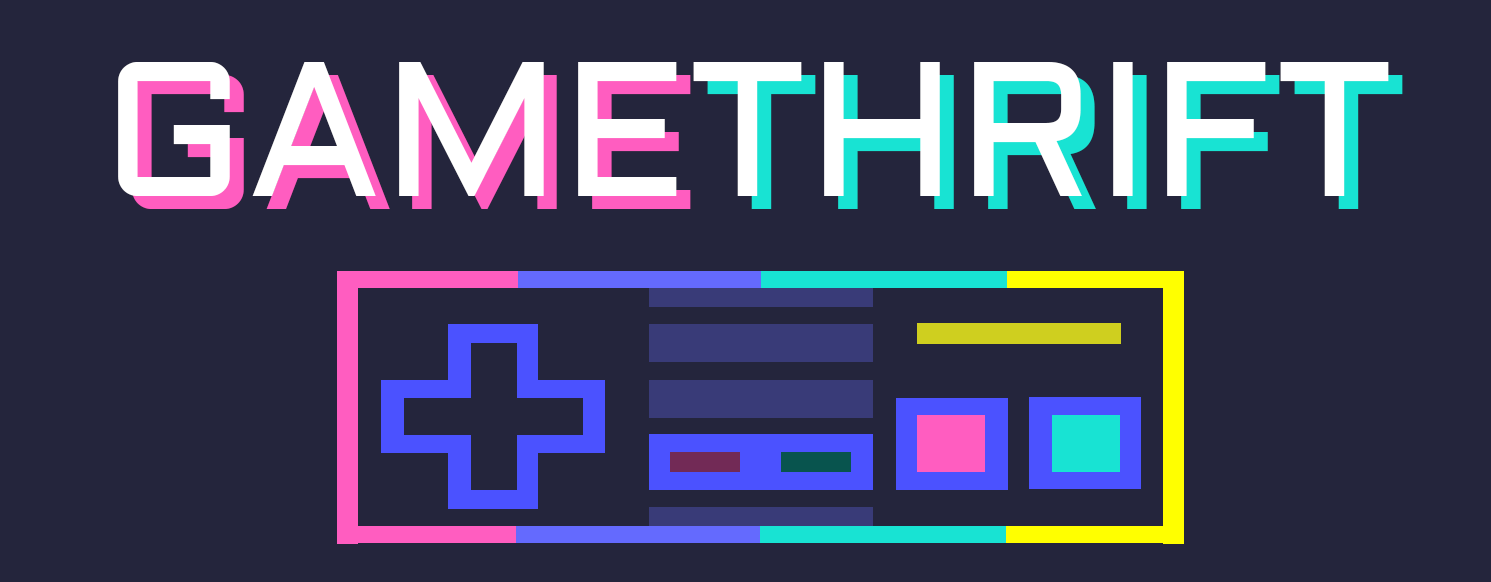
<style>
.page{position:relative;width:1491px;height:582px;background:#24253c}
.page>*{position:absolute;margin:0}
.t1{font:192.4px "Aldrich";color:#ffffff}
.t2{font:192.4px "Aldrich";color:#18e3d3}
.t3{font:192.4px "Aldrich";color:#ff5dc0}
</style>
<div class="page">
<p class="t1" style="left:118px;top:62px;width:1271px;height:134px">GAMETHRIFT</p>
<p class="t2" style="left:132px;top:75px;width:1271px;height:134px"><span class="t3">GAME</span>THRIFT</p>
</div>
